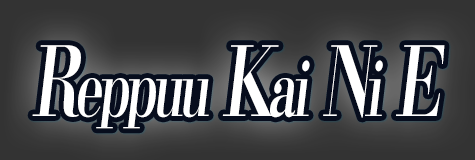
<style>
.page{position:relative;width:475px;height:160px}
.page>*{position:absolute;margin:0}
.t1{font:76.8px "KochoStd-Heavy";letter-spacing:-0.08em;color:#ffffff;font-style:italic;scale:0.67 1}
.t2{font:96px "KochoStd-Heavy";letter-spacing:-0.08em;color:#ffffff;font-style:italic;scale:0.67 1}
</style>
<div class="page">
<p class="t1" style="left:32px;top:45px;width:413px;height:84px"><span class="t2">R</span>eppuu<span class="t2"> K</span>ai<span class="t2"> N</span>i<span class="t2"> E</span></p>
</div>
